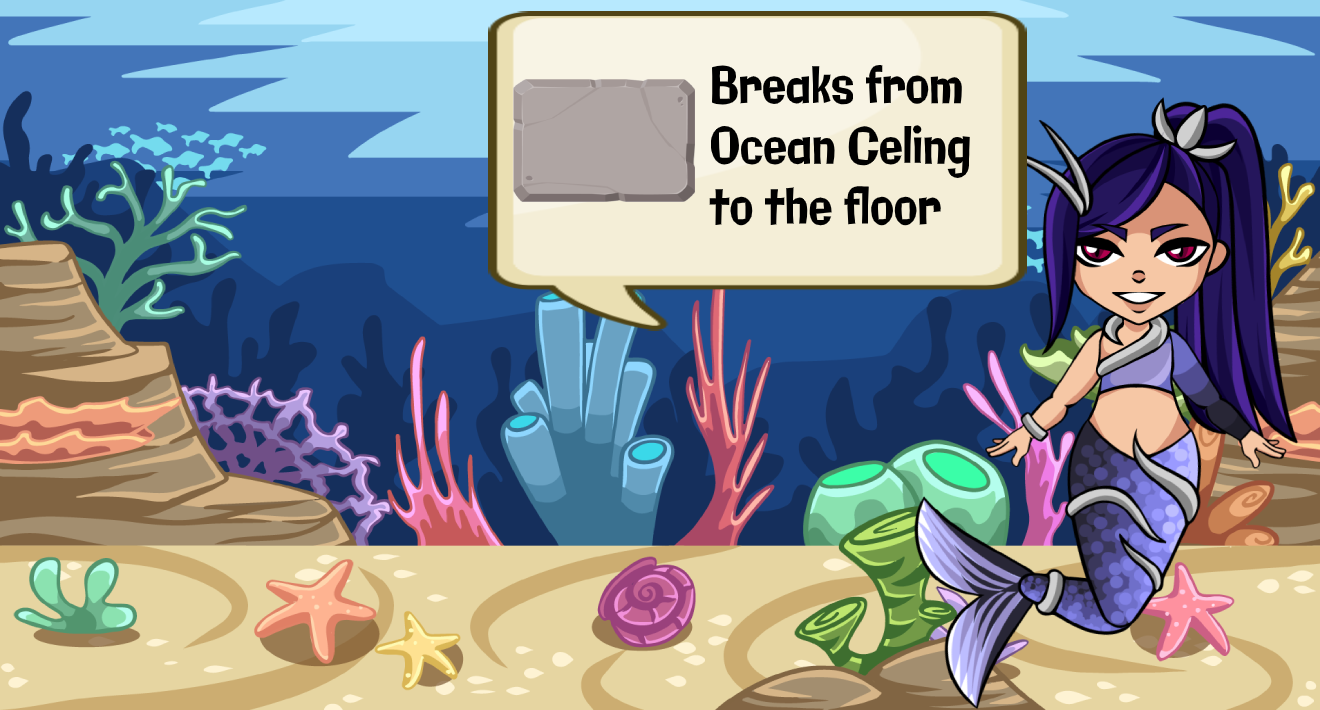
<style>
.page{position:relative;width:1320px;height:710px}
.page>*{position:absolute;margin:0}
.t1{font:50.5px "Galindo-Regular";color:#000000;scale:0.77 1}
</style>
<div class="page">
<p class="t1" style="left:709px;top:65px;width:261px;height:161px">Breaks from <br> Ocean Celing<br> to the floor</p>
</div>
